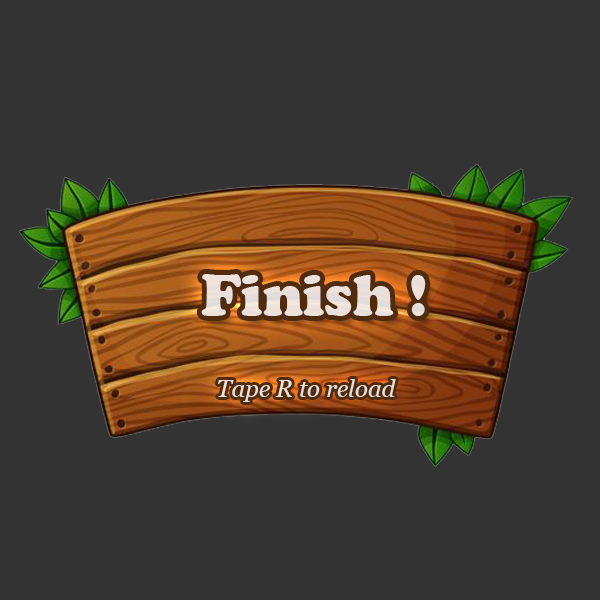
<style>
.page{position:relative;width:600px;height:600px;background:#333333}
.page>*{position:absolute;margin:0}
.t1{font:60px "CooperBlack";color:#ece1db}
.t2{font:24px "Georgia-Italic";color:#eae0db}
</style>
<div class="page">
<p class="t1" style="left:201px;top:274px;width:225px;height:42px">Finish !</p>
<p class="t2" style="left:218px;top:379px;width:178px;height:23px">Tape R to reload</p>
</div>
